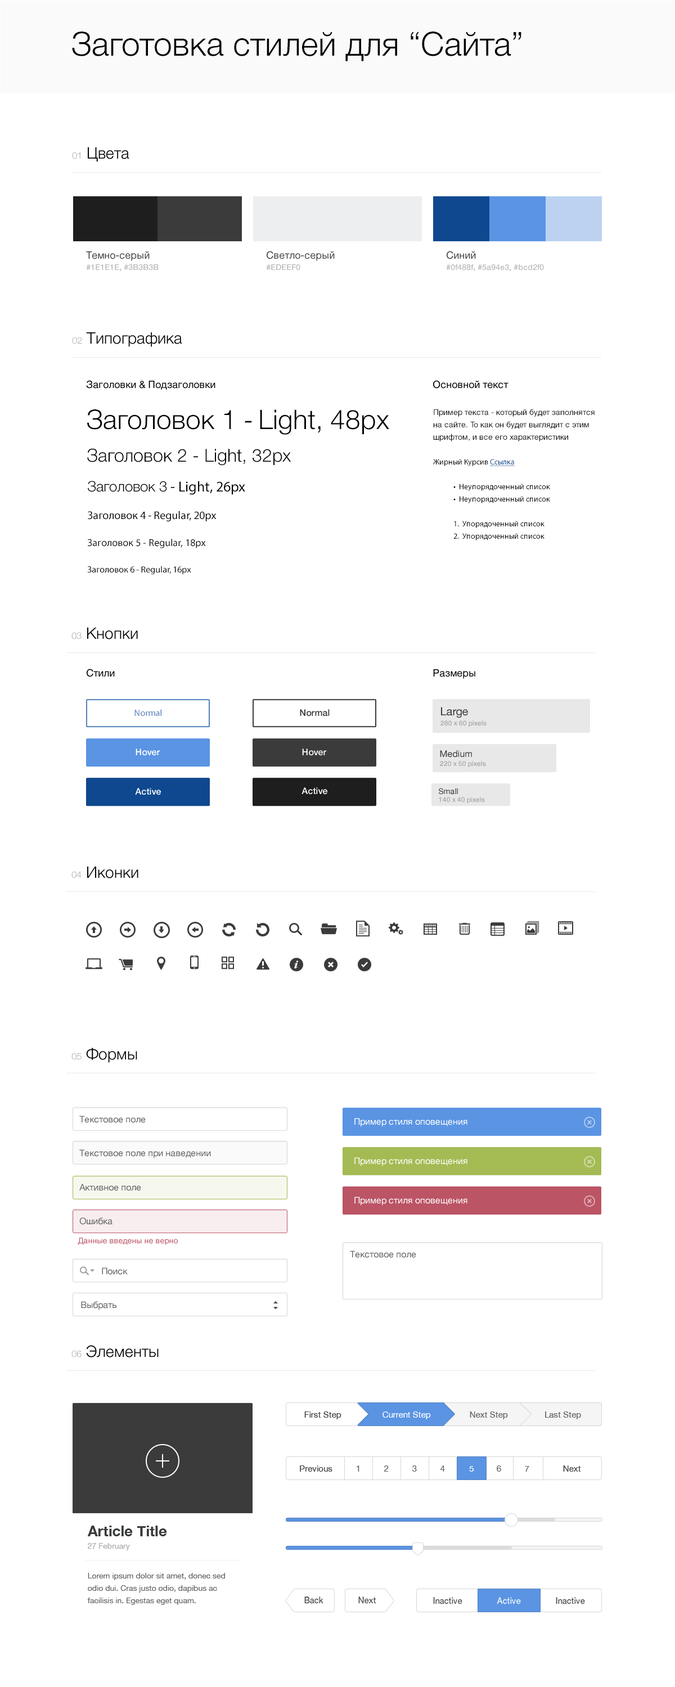
<style>
.page{position:relative;width:675px;height:1687px;background:#ffffff}
.page>*{position:absolute;margin:0}
.t1{font:33.2px "HelveticaNeueCyr-Light";color:#000000}
.t2{font:15.8px "HelveticaNeue-Light";color:#000000}
.t3{font:9px "HelveticaNeue-Light";color:#aaaaaa}
.t4{font:7.9px/11.2px "HelveticaNeue-Medium";color:#bbbbbb}
.t5{font:10.1px "HelveticaNeue";color:#444444}
.t6{font:10.1px "HelveticaNeue";color:#000000}
.t7{font:27px "HelveticaNeueCyr-Light";color:#000000}
.t8{font:27px "MyriadPro-Regular";color:#000000}
.t9{font:7.9px/12.4px "HelveticaNeueCyr-Roman";color:#000000}
.t10{font:7.9px/12.4px "MyriadPro-Regular";color:#000000}
.t11{font:7.9px/12.4px "MyriadPro-Regular";color:#0f488f;text-decoration:underline}
.t12{font:18px "HelveticaNeueCyr-Light";color:#000000}
.t13{font:14.6px "MyriadPro-Regular";color:#000000}
.t14{font:14.6px "HelveticaNeueCyr-Light";color:#000000}
.t15{font:11.2px "MyriadPro-Regular";color:#000000}
.t16{font:10.1px "MyriadPro-Regular";color:#000000}
.t17{font:9px "MyriadPro-Regular";color:#000000}
.t18{font:15.8px "HelveticaNeue-Light";color:#010101}
.t19{font:9px "MyriadPro-Regular";color:#547fbb}
.t20{font:9px "HelveticaNeue-Medium";color:#3b3b3b}
.t21{font:11.2px "HelveticaNeue";color:#3b3b3b}
.t22{font:6.8px "HelveticaNeue-Medium";color:#a4a4a4}
.t23{font:9px "HelveticaNeue-Medium";color:#ffffff}
.t24{font:9px "HelveticaNeue";color:#3b3b3b}
.t25{font:7.9px "HelveticaNeue";color:#3b3b3b}
.t26{font:9px "HelveticaNeue";color:#666666}
.t27{font:9px "HelveticaNeue";color:#ffffff}
.t28{font:7.9px "HelveticaNeue";color:#bb5465}
.t29{font:8.4px "HelveticaNeue";color:#444444}
.t30{font:8.4px "HelveticaNeue";color:#ffffff}
.t31{font:8.4px "HelveticaNeue";color:#666666}
.t32{font:14.6px/12.4px "HelveticaNeue-Bold";color:#393a3c}
.t33{font:7.9px/12.4px "HelveticaNeue";color:#aaaaaa}
.t34{font:7.9px/12.4px "HelveticaNeue";color:#666666}
.t35{font:8.4px "HelveticaNeue";color:#454545}
</style>
<div class="page">
<p class="t1" style="left:72px;top:31px;width:449px;height:30px">Заготовка стилей для “Сайта”</p>
<p class="t2" style="left:72px;top:147px;width:57px;height:15px"><span class="t3">01 </span>Цвета</p>
<p class="t4" style="left:86px;top:251px;width:73px;height:21px"><span class="t5">Темно-серый<br></span>#1E1E1E, #3B3B3B</p>
<p class="t5" style="left:266px;top:251px;width:69px;height:20px">Светло-серый<br><span class="t4">#EDEEF0</span></p>
<p class="t4" style="left:446px;top:251px;width:98px;height:21px"><span class="t5">Синий<br></span>#0f488f, #5a94e3, #bcd2f0</p>
<p class="t2" style="left:72px;top:332px;width:110px;height:15px"><span class="t3">02 </span>Типографика</p>
<p class="t6" style="left:86px;top:380px;width:129px;height:10px">Заголовки &amp; Подзаголовки</p>
<p class="t6" style="left:433px;top:380px;width:75px;height:9px">Основной текст</p>
<p class="t7" style="left:87px;top:409px;width:302px;height:26px">Заголовок 1 <span class="t8">- </span>Light, 48px</p>
<p class="t9" style="left:433px;top:409px;width:161px;height:131px">Пример текста - который будет заполнятся на сайте. То как он будет выглядит с этим шрифтом, и все его характеристики <br><br><span class="t10">Жирный Курсив </span><span class="t11">Ссылка <br><br></span><span class="t10"> •  Неупорядоченный список<br> •  Неупорядоченный список<br><br> 1.  Упорядоченный список<br> 2.  Упорядоченный список</span></p>
<p class="t12" style="left:87px;top:448px;width:204px;height:18px">Заголовок 2 - Light, 32px</p>
<p class="t13" style="left:88px;top:481px;width:157px;height:14px"><span class="t14">Заголовок 3</span> - Light, 26px</p>
<p class="t15" style="left:88px;top:511px;width:129px;height:11px">Заголовок 4 - Regular, 20px</p>
<p class="t16" style="left:87px;top:539px;width:119px;height:9px">Заголовок 5 - Regular, 18px</p>
<p class="t17" style="left:87px;top:566px;width:104px;height:9px">Заголовок 6 - Regular, 16px</p>
<p class="t18" style="left:71px;top:628px;width:67px;height:11px"><span class="t3">03 </span>Кнопки</p>
<p class="t6" style="left:87px;top:669px;width:28px;height:8px">Стили</p>
<p class="t6" style="left:433px;top:669px;width:42px;height:10px">Размеры</p>
<p class="t19" style="left:134px;top:709px;width:27px;height:8px">Normal</p>
<p class="t20" style="left:300px;top:709px;width:30px;height:8px">Normal</p>
<p class="t21" style="left:441px;top:707px;width:27px;height:11px">Large</p>
<p class="t22" style="left:440px;top:720px;width:46px;height:7px">280 x 60 pixels</p>
<p class="t23" style="left:136px;top:749px;width:24px;height:7px">Hover</p>
<p class="t23" style="left:302px;top:749px;width:25px;height:7px">Hover</p>
<p class="t22" style="left:440px;top:761px;width:46px;height:7px">220 x 50 pixels</p>
<p class="t24" style="left:440px;top:750px;width:32px;height:8px">Medium</p>
<p class="t23" style="left:135px;top:788px;width:26px;height:7px">Active</p>
<p class="t23" style="left:301px;top:787px;width:26px;height:8px">Active</p>
<p class="t22" style="left:439px;top:797px;width:46px;height:7px">140 x 40 pixels</p>
<p class="t25" style="left:439px;top:788px;width:19px;height:7px">Small</p>
<p class="t2" style="left:71px;top:867px;width:67px;height:11px"><span class="t3">04 </span>Иконки</p>
<p class="t2" style="left:71px;top:1048px;width:66px;height:15px"><span class="t3">05 </span>Формы</p>
<p class="t26" style="left:79px;top:1116px;width:67px;height:7px">Текстовое поле</p>
<p class="t27" style="left:354px;top:1118px;width:113px;height:9px">Пример стиля оповещения</p>
<p class="t26" style="left:79px;top:1150px;width:132px;height:9px">Текстовое поле при наведении</p>
<p class="t27" style="left:354px;top:1157px;width:113px;height:9px">Пример стиля оповещения</p>
<p class="t26" style="left:79px;top:1184px;width:62px;height:7px">Активное поле</p>
<p class="t27" style="left:354px;top:1197px;width:113px;height:9px">Пример стиля оповещения</p>
<p class="t26" style="left:79px;top:1218px;width:33px;height:7px">Ошибка</p>
<p class="t28" style="left:78px;top:1238px;width:100px;height:7px">Данные введены не верно</p>
<p class="t26" style="left:350px;top:1251px;width:66px;height:7px">Текстовое поле</p>
<p class="t26" style="left:102px;top:1268px;width:26px;height:7px">Поиск</p>
<p class="t26" style="left:81px;top:1301px;width:36px;height:9px">Выбрать</p>
<p class="t2" style="left:71px;top:1345px;width:88px;height:13px"><span class="t3">06 </span>Элементы</p>
<p class="t29" style="left:304px;top:1412px;width:37px;height:8px">First Step</p>
<p class="t30" style="left:382px;top:1412px;width:49px;height:8px">Current Step</p>
<p class="t31" style="left:470px;top:1412px;width:38px;height:8px">Next Step</p>
<p class="t31" style="left:545px;top:1412px;width:36px;height:8px">Last Step</p>
<p class="t29" style="left:300px;top:1466px;width:32px;height:6px">Previous</p>
<p class="t31" style="left:357px;top:1466px;width:2px;height:6px">1</p>
<p class="t31" style="left:384px;top:1466px;width:5px;height:6px">2</p>
<p class="t31" style="left:412px;top:1466px;width:5px;height:6px">3</p>
<p class="t31" style="left:440px;top:1466px;width:5px;height:6px">4</p>
<p class="t30" style="left:469px;top:1466px;width:5px;height:6px">5</p>
<p class="t31" style="left:497px;top:1466px;width:4px;height:6px">6</p>
<p class="t31" style="left:525px;top:1466px;width:4px;height:6px">7</p>
<p class="t29" style="left:563px;top:1466px;width:18px;height:6px">Next</p>
<p class="t32" style="left:87px;top:1526px;width:80px;height:25px">Article Title<br><span class="t33">27 February</span></p>
<p class="t34" style="left:87px;top:1573px;width:138px;height:32px">Lorem ipsum dolor sit amet, donec sed odio dui. Cras justo odio, dapibus ac facilisis in. Egestas eget quam.</p>
<p class="t35" style="left:304px;top:1597px;width:19px;height:7px">Back</p>
<p class="t35" style="left:358px;top:1597px;width:18px;height:7px">Next</p>
<p class="t35" style="left:433px;top:1597px;width:29px;height:8px">Inactive</p>
<p class="t30" style="left:497px;top:1597px;width:24px;height:8px">Active</p>
<p class="t35" style="left:556px;top:1597px;width:29px;height:8px">Inactive</p>
</div>
